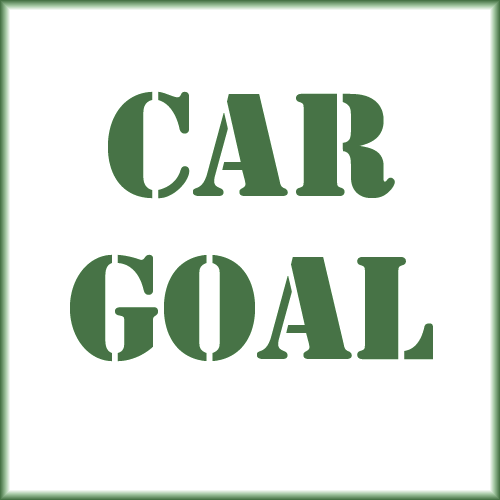
<style>
.page{position:relative;width:500px;height:500px;background:#ffffff}
.page>*{position:absolute;margin:0}
.t1{font:136px "StencilStd";color:#477346}
</style>
<div class="page">
<p class="t1" style="left:70px;top:91px;width:363px;height:271px;text-align:center">Car<br>GOAL</p>
</div>
